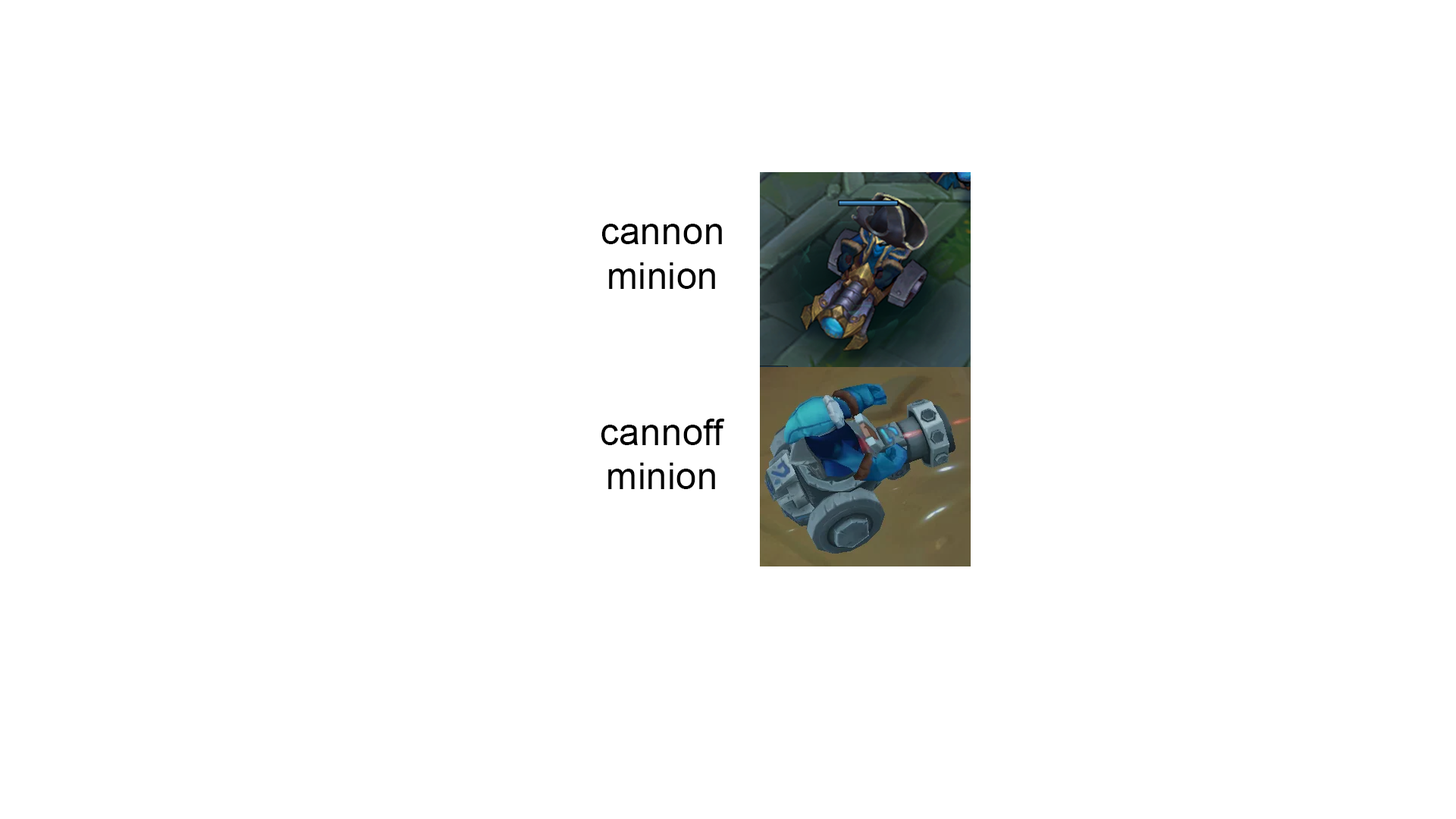
<style>
.page{position:relative;width:1456px;height:819px;background:#ffffff}
.page>*{position:absolute;margin:0}
.t1{font:37.2px "ArialMT";letter-spacing:0.01em;color:#000000}
</style>
<div class="page">
<p class="t1" style="left:602px;top:224px;width:120px;height:65px;text-align:center">cannon<br>minion</p>
<p class="t1" style="left:601px;top:419px;width:124px;height:70px;text-align:center">cannoff<br>minion</p>
</div>
